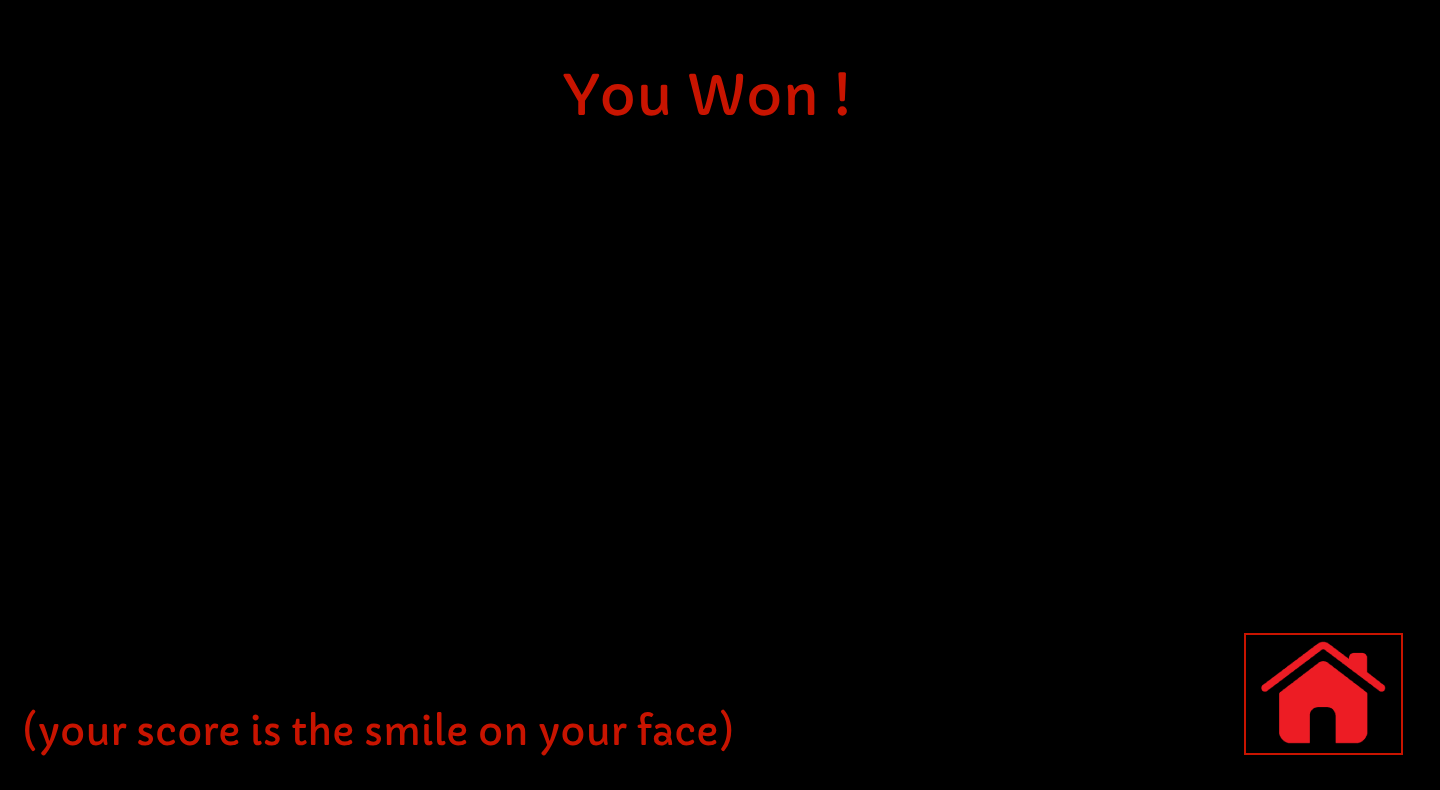
<style>
.page{position:relative;width:1440px;height:790px;background:#000000}
.page>*{position:absolute;margin:0}
.t1{font:55px "Capriola-Regular";color:#c81400}
.t2{font:38px "Capriola-Regular";color:#c81400}
</style>
<div class="page">
<p class="t1" style="left:563px;top:72px;width:284px;height:44px">You Won !</p>
<p class="t2" style="left:25px;top:709px;width:707px;height:47px">(your score is the smile on your face)</p>
</div>
